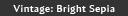
<style>
.page{position:relative;width:128px;height:16px;background:#333333}
.page>*{position:absolute;margin:0}
.t1{font:10px "AmiraParadiso";letter-spacing:0.05em;color:#ffffff}
</style>
<div class="page">
<p class="t1" style="left:13px;top:5px;width:102px;height:9px">Vintage: Bright Sepia</p>
</div>
